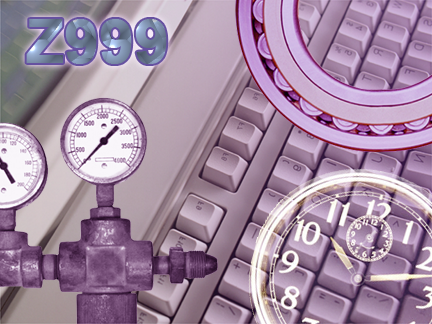
<style>
.page{position:relative;width:432px;height:324px}
.page>*{position:absolute;margin:0}
.t1{font:60px "Arial-BoldMT";font-weight:bold}
</style>
<div class="page">
<p class="t1" style="left:26px;top:19px;width:141px;height:45px">Z999</p>
</div>
